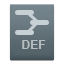
<style>
.page{position:relative;width:64px;height:64px;background:#ffffff}
.page>*{position:absolute;margin:0}
.t1{font:12px "Arial-BoldMT";color:#b6bec2}
</style>
<div class="page">
<p class="t1" style="left:22px;top:40px;width:24px;height:9px">DEF</p>
</div>
